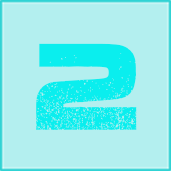
<style>
.page{position:relative;width:171px;height:171px;background:#b3efef}
.page>*{position:absolute;margin:0}
.t1{font:121px "Coalition";color:#0aeeee}
</style>
<div class="page">
<p class="t1" style="left:36px;top:43px;width:101px;height:88px">2</p>
</div>
